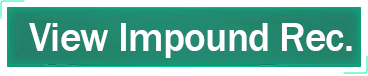
<style>
.page{position:relative;width:368px;height:76px;background:#ffffff}
.page>*{position:absolute;margin:0}
.t1{font:70px "FranklinGothic-Medium";letter-spacing:-0.015em;color:#ffffff}
</style>
<div class="page">
<p class="t1" style="left:29px;top:23px;width:323px;height:35px">View Impound Rec.</p>
</div>
